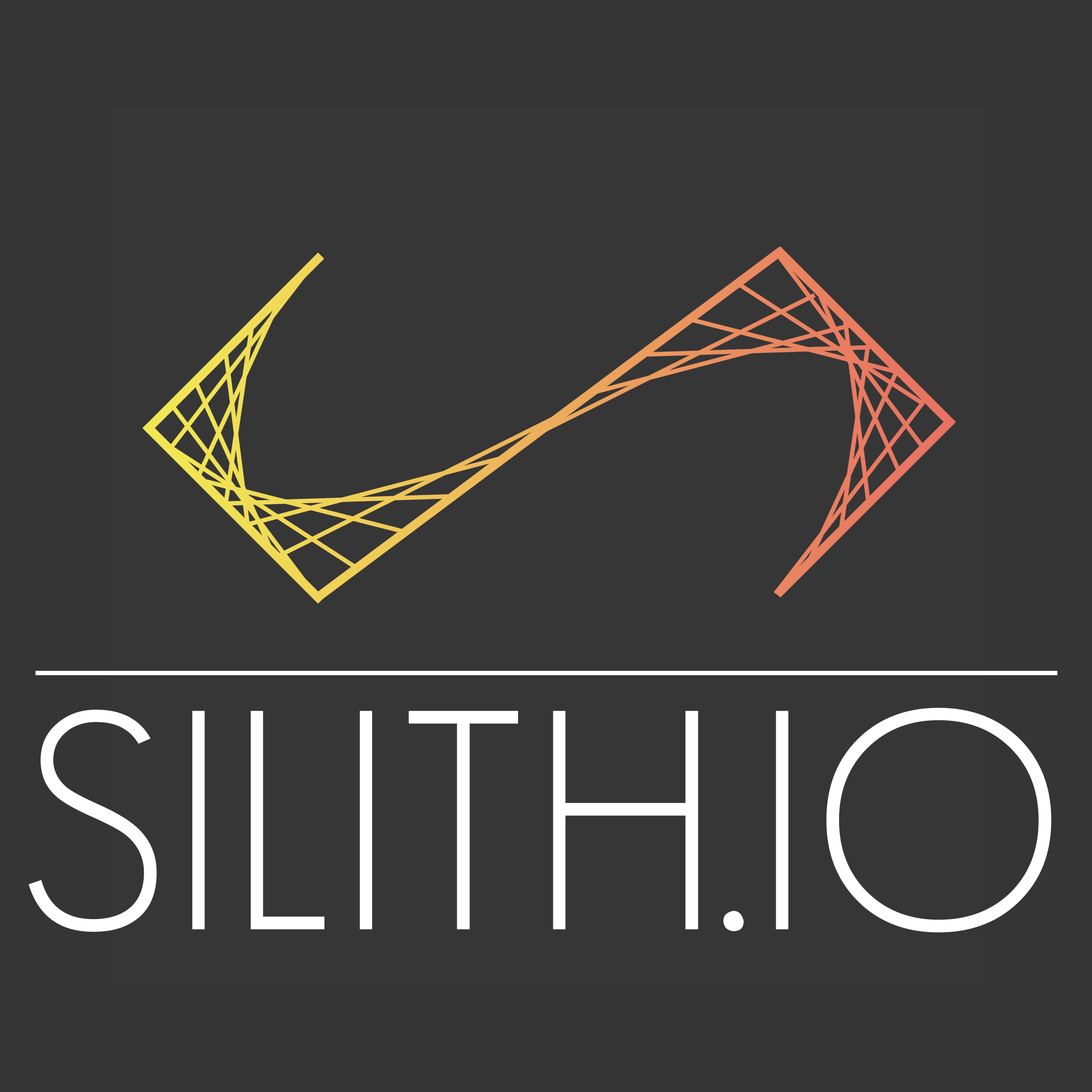
<style>
.page{position:relative;width:1092px;height:1092px;background:#363636}
.page>*{position:absolute;margin:0}
.t1{font:305.8px "GeosansLight";color:#ffffff}
</style>
<div class="page">
<p class="t1" style="left:28px;top:708px;width:1023px;height:225px">SILITH.IO</p>
</div>
